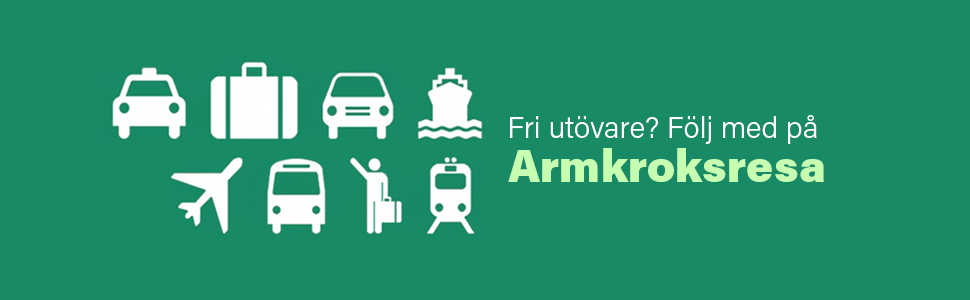
<style>
.page{position:relative;width:970px;height:300px;background:#188a66}
.page>*{position:absolute;margin:0}
.t1{font:30px/44px "AcuminPro-Light";color:#ffffff}
.t2{font:45px/44px "AcuminPro-Black";color:#c6ffb2}
</style>
<div class="page">
<p class="t1" style="left:508px;top:115px;width:316px;height:67px">Fri utövare? Följ med på<br><span class="t2">Armkroksresa</span></p>
</div>
